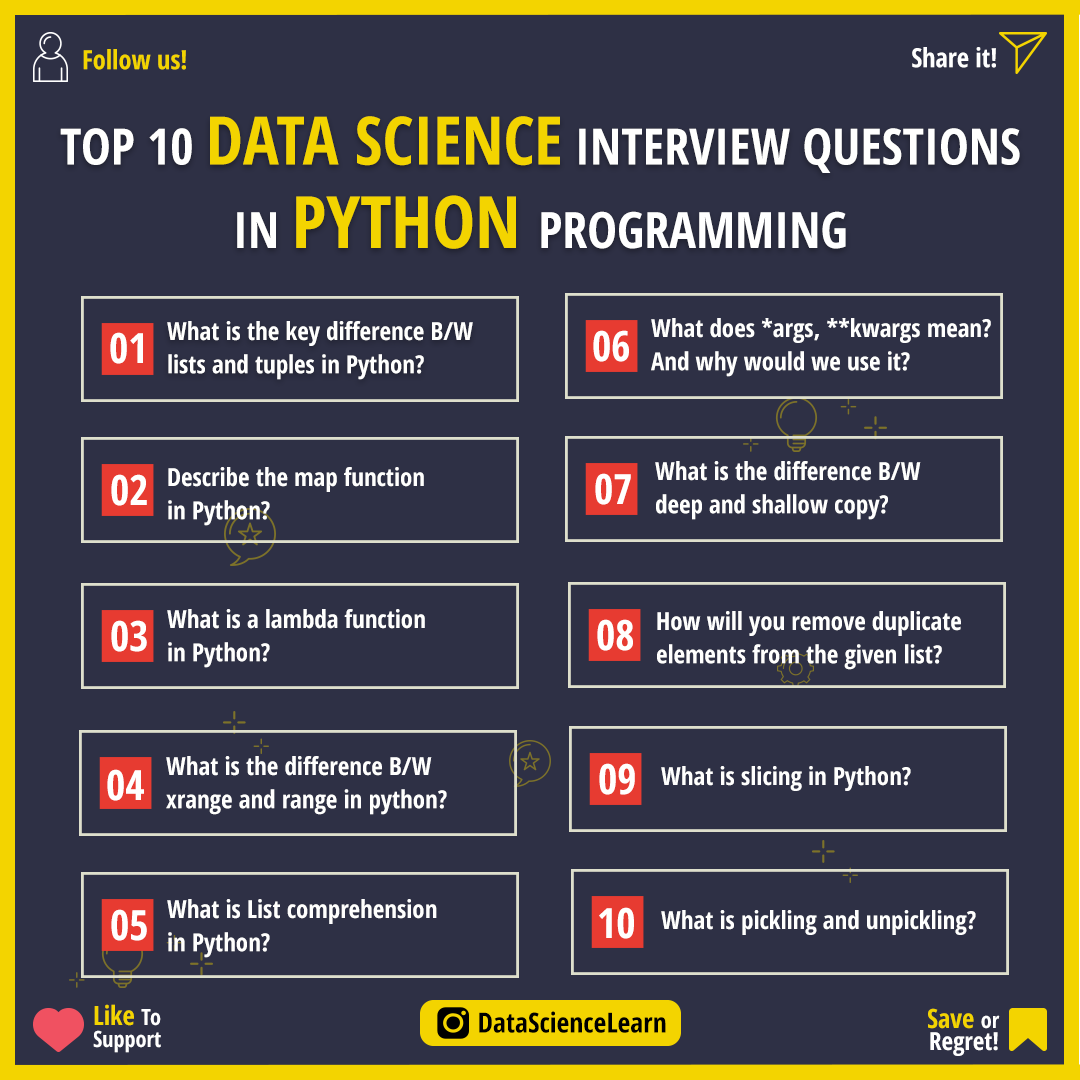
<style>
.page{position:relative;width:1080px;height:1080px;background:#2e3045}
.page>*{position:absolute;margin:0}
.t1{font:26.4px "OpenSans-CondensedBold";color:#f3d400}
.t2{font:26.4px "OpenSans-CondensedBold";color:#ffffff}
.t3{font:50px/72.2px "OpenSans-CondensedBold";color:#fffffe}
.t4{font:66.7px/72.2px "OpenSans-CondensedBold";color:#f3d400}
.t5{font:50px/83.3px "OpenSans-CondensedBold";color:#fffffe}
.t6{font:72.2px/83.3px "OpenSans-CondensedBold";color:#f3d400}
.t7{font:50px/83.3px "OpenSans-CondensedBold";color:#ffffff}
.t8{font:25px/33.3px "OpenSans-CondensedBold";color:#fffffe}
.t9{font:41.7px "OpenSans-CondensedBold";color:#fffffe}
.t10{font:25px "OpenSans-CondensedBold";color:#fffffe}
.t11{font:22.2px/22.2px "OpenSans-CondensedBold";color:#ffffff}
.t12{font:26.4px/22.2px "OpenSans-CondensedBold";color:#f3d400}
.t13{font:27.8px "OpenSans-CondensedBold";color:#000000}
.t14{font:25px/22.2px "OpenSans-CondensedBold";color:#ffffff}
</style>
<div class="page">
<p class="t1" style="left:83px;top:49px;width:103px;height:21px">Follow us!</p>
<p class="t2" style="left:912px;top:47px;width:84px;height:21px">Share it!</p>
<p class="t3" style="left:60px;top:116px;width:960px;height:133px;text-align:center">TOP 10 <span class="t4">DATA SCIENCE</span> INTERVIEW QUESTIONS<br><span class="t5">IN </span><span class="t6">PYTHON </span><span class="t7">PROGRAMMING</span></p>
<p class="t8" style="left:651px;top:318px;width:340px;height:59px">What does *args, **kwargs mean? <br>And why would we use it?</p>
<p class="t8" style="left:167px;top:321px;width:306px;height:59px">What is the key difference B/W <br>lists and tuples in Python?</p>
<p class="t9" style="left:110px;top:332px;width:33px;height:32px">01</p>
<p class="t9" style="left:593px;top:330px;width:36px;height:32px">06</p>
<p class="t8" style="left:655px;top:461px;width:266px;height:59px">What is the difference B/W<br>deep and shallow copy?</p>
<p class="t8" style="left:168px;top:467px;width:256px;height:59px">Describe the map function <br>in Python?</p>
<p class="t9" style="left:595px;top:473px;width:36px;height:32px">07</p>
<p class="t9" style="left:111px;top:474px;width:36px;height:32px">02</p>
<p class="t8" style="left:167px;top:609px;width:258px;height:59px">What is a lambda function <br>in Python?</p>
<p class="t8" style="left:657px;top:611px;width:304px;height:59px">How will you remove duplicate <br>elements from the given list?</p>
<p class="t9" style="left:111px;top:620px;width:36px;height:32px">03</p>
<p class="t9" style="left:597px;top:619px;width:36px;height:32px">08</p>
<p class="t8" style="left:166px;top:756px;width:281px;height:59px">What is the difference B/W <br>xrange and range in python?</p>
<p class="t9" style="left:107px;top:769px;width:37px;height:32px">04</p>
<p class="t9" style="left:599px;top:763px;width:36px;height:32px">09</p>
<p class="t10" style="left:661px;top:766px;width:250px;height:25px">What is slicing in Python?</p>
<p class="t8" style="left:167px;top:899px;width:270px;height:59px">What is List comprehension<br>in Python?</p>
<p class="t9" style="left:111px;top:909px;width:36px;height:32px">05</p>
<p class="t9" style="left:599px;top:907px;width:35px;height:32px">10</p>
<p class="t10" style="left:661px;top:910px;width:315px;height:25px">What is pickling and unpickling?</p>
<p class="t11" style="left:93px;top:1004px;width:68px;height:49px"><span class="t12">Like </span>To<br>Support</p>
<p class="t13" style="left:479px;top:1011px;width:187px;height:22px">DataScienceLearn</p>
<p class="t14" style="left:928px;top:1008px;width:72px;height:48px;text-align:right"><span class="t12">Save </span><span class="t11">or<br></span>Regret!</p>
</div>
